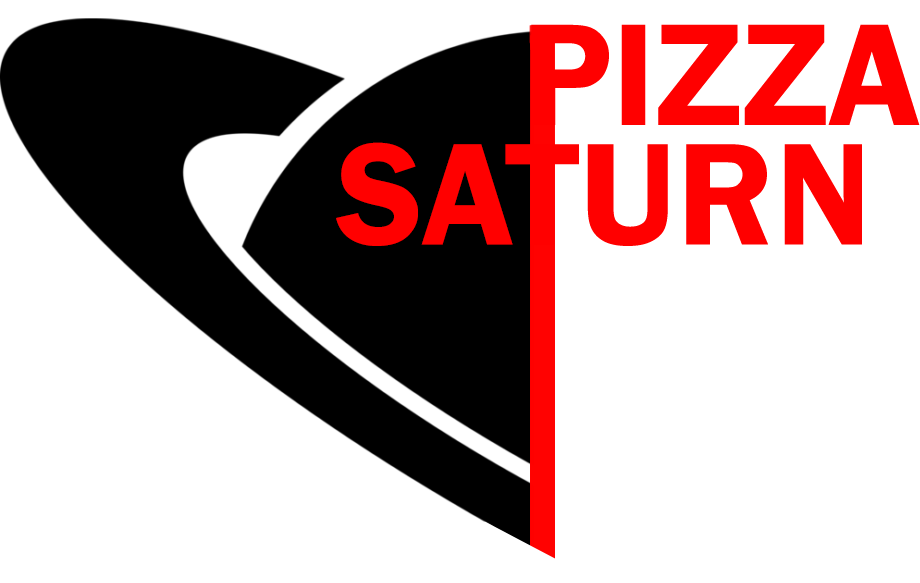
<style>
.page{position:relative;width:920px;height:583px;background:#ffffff}
.page>*{position:absolute;margin:0}
.t1{font:150px "FranklinGothic-Demi";color:#ff0000}
</style>
<div class="page">
<p class="t1" style="left:531px;top:24px;width:389px;height:101px">PIZZA</p>
<p class="t1" style="left:336px;top:142px;width:526px;height:104px">SATURN</p>
</div>
